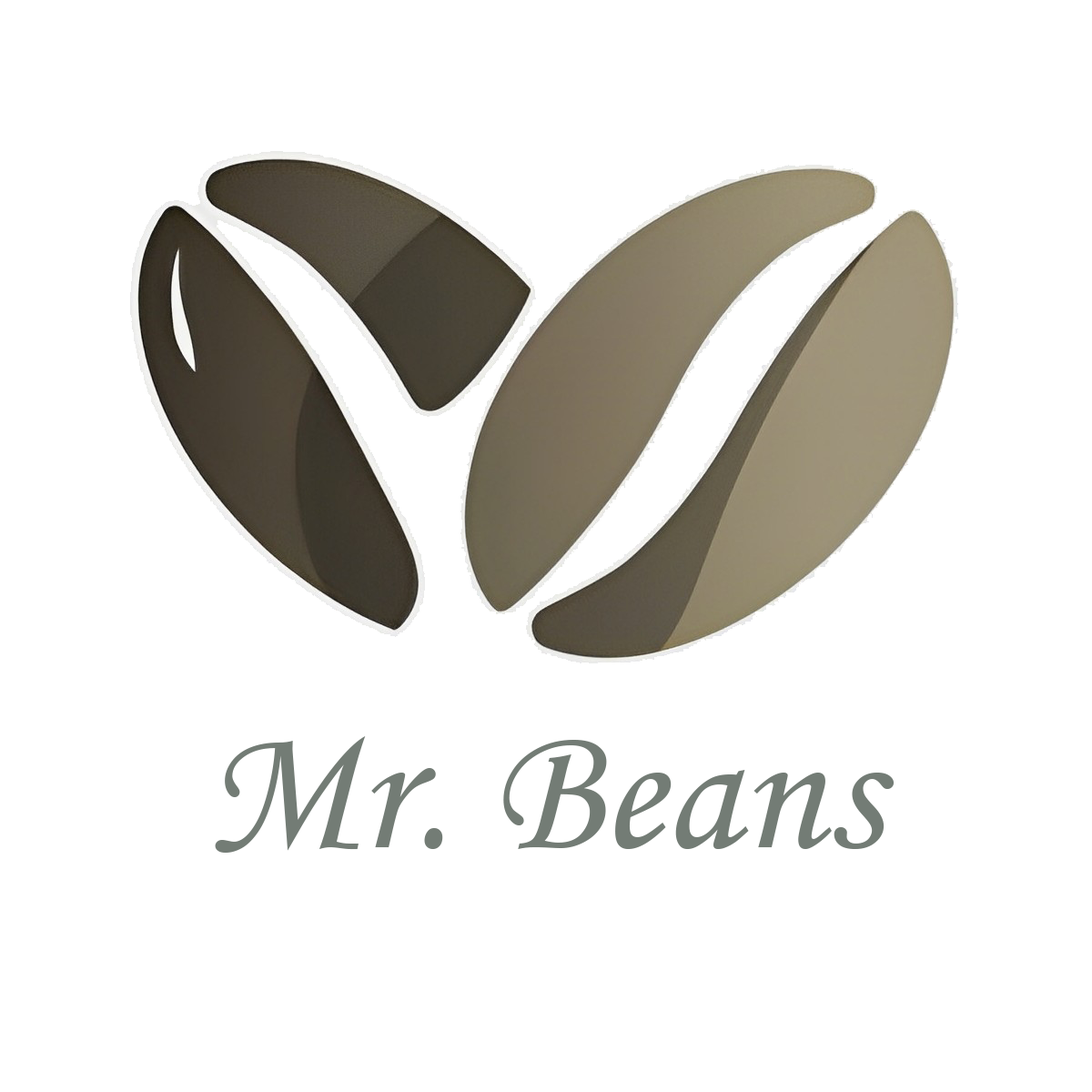
<style>
.page{position:relative;width:1092px;height:1092px;background:#ffffff}
.page>*{position:absolute;margin:0}
.t1{font:182px "MonotypeCorsiva";color:#737c75}
</style>
<div class="page">
<p class="t1" style="left:215px;top:736px;width:680px;height:117px">Mr. Beans</p>
</div>
